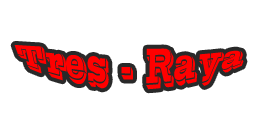
<style>
.page{position:relative;width:256px;height:128px;background:#ffffff}
.page>*{position:absolute;margin:0}
.t1{font:25px "VinetaBT-Regular";color:#ff0000}
</style>
<div class="page">
<p class="t1" style="left:14px;top:45px;width:230px;height:45px">Tres - Raya</p>
</div>
